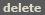
<style>
.page{position:relative;width:45px;height:15px;background:#5a5a5a}
.page>*{position:absolute;margin:0}
.t1{font:11px "Verdana-Bold";color:#dedbcb}
</style>
<div class="page">
<p class="t1" style="left:3px;top:3px;width:38px;height:9px">delete</p>
</div>
